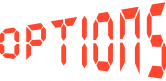
<style>
.page{position:relative;width:166px;height:81px;background:#ffffff}
.page>*{position:absolute;margin:0}
.t1{font:75px "QuartzMS";color:#ff462e;scale:0.57 1}
</style>
<div class="page">
<p class="t1" style="left:0px;top:2px;width:167px;height:77px">OPTIONS</p>
</div>
